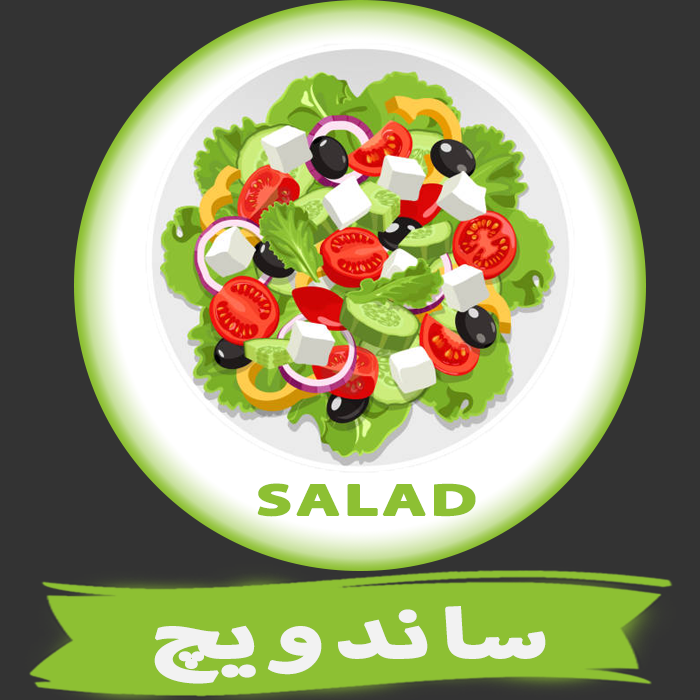
<style>
.page{position:relative;width:700px;height:700px;background:#333333}
.page>*{position:absolute;margin:0}
.t1{font:61.6px "MyriadArabic-Bold";letter-spacing:0.03em;color:#8dc033;font-weight:bold;scale:1.5 1}
.t2{font:94.3px "MyriadArabic-Bold";letter-spacing:0.03em;color:#f2f2f2;font-weight:bold;scale:1.5 1}
</style>
<div class="page">
<p class="t1" style="left:257px;top:483px;width:219px;height:34px">SALAD</p>
<p class="t2" style="left:154px;top:606px;width:392px;height:78px">ساندویچ</p>
</div>
